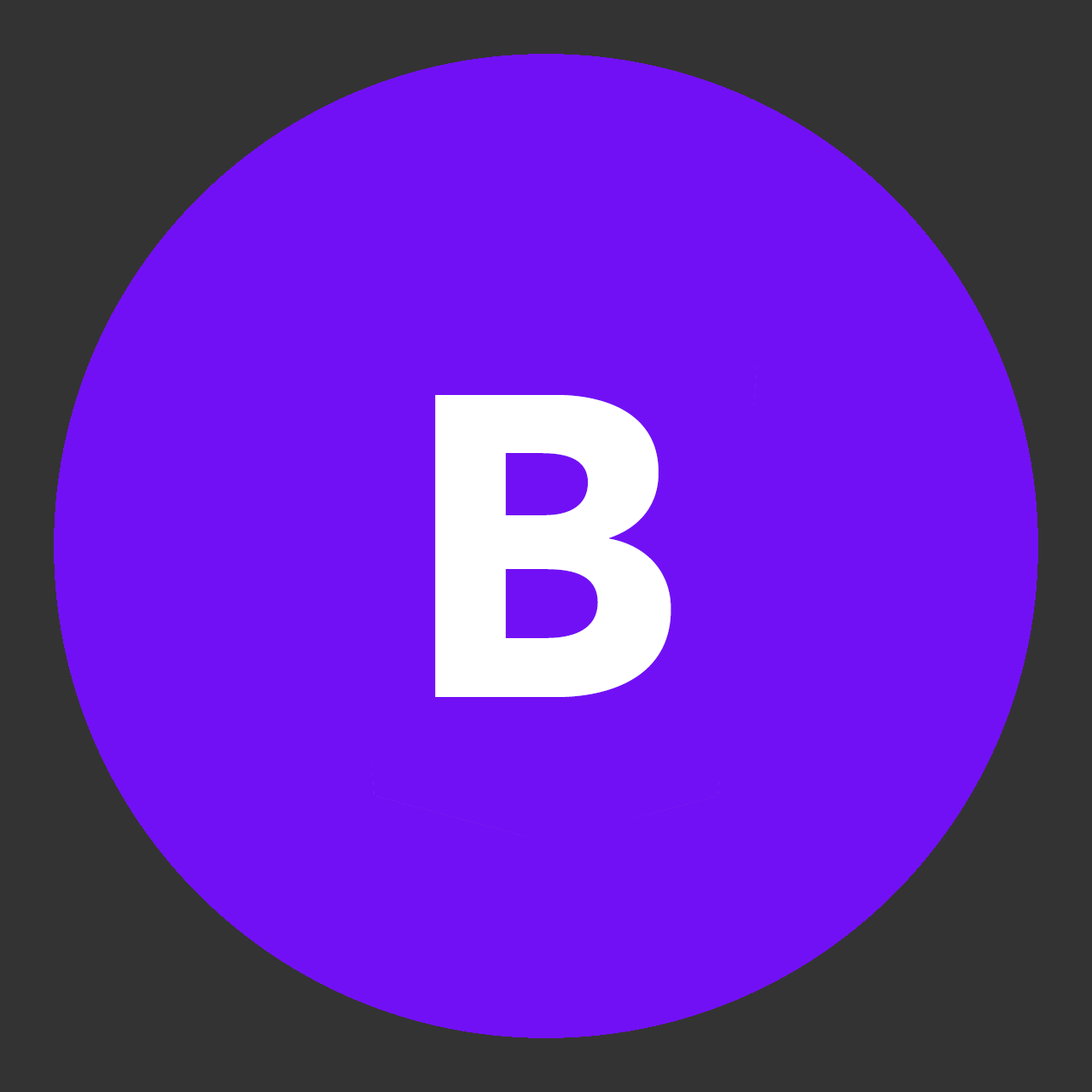
<style>
.page{position:relative;width:1092px;height:1092px;background:#7210f5}
.page>*{position:absolute;margin:0}
.t1{font:426.6px "AvenirNextLTPro-Bold";color:#ffffff}
</style>
<div class="page">
<p class="t1" style="left:435px;top:395px;width:236px;height:302px">B</p>
</div>
